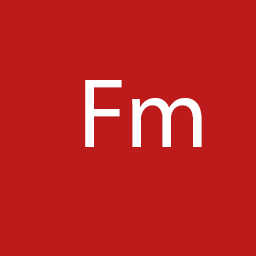
<style>
.page{position:relative;width:256px;height:256px;background:#bd1b1b}
.page>*{position:absolute;margin:0}
.t1{font:100px "MyriadPro-Regular";color:#ffffff}
</style>
<div class="page">
<p class="t1" style="left:85px;top:80px;width:117px;height:67px">Fm</p>
</div>
